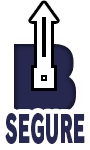
<style>
.page{position:relative;width:90px;height:150px;background:#ffffff}
.page>*{position:absolute;margin:0}
.t1{font:37.3px "RodinNTLGPro-UB";color:#272850;scale:0.48 1}
</style>
<div class="page">
<p class="t1" style="left:5px;top:113px;width:80px;height:31px">SEGURE</p>
</div>
